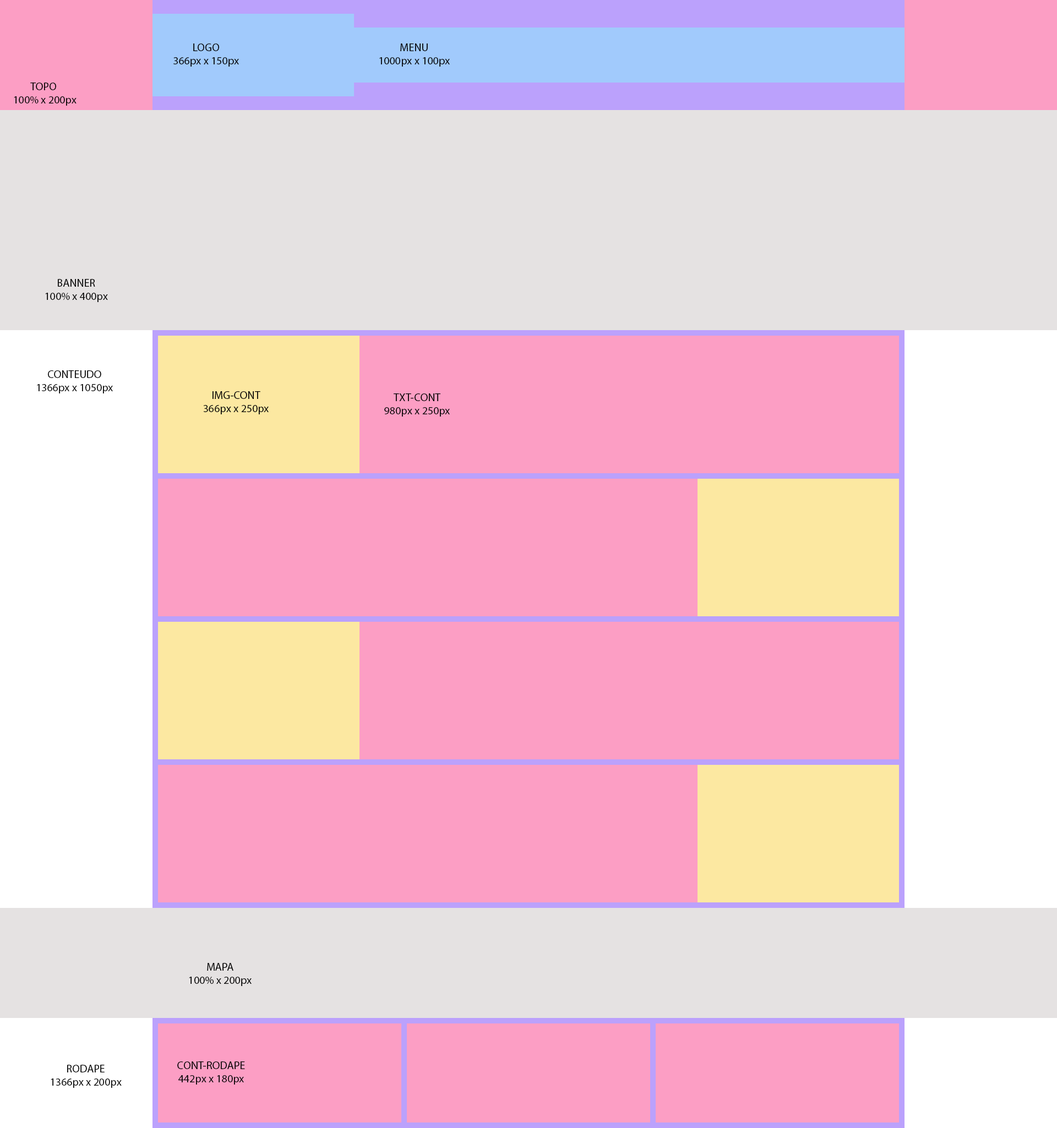
<style>
.page{position:relative;width:1057px;height:1128px;background:#fc9ec4}
.page>*{position:absolute;margin:0}
.t1{font:11px "MyriadPro-Regular";color:#000000}
</style>
<div class="page">
<p class="t1" style="left:173px;top:43px;width:66px;height:24px;text-align:center">LOGO<br>366px x 150px</p>
<p class="t1" style="left:379px;top:43px;width:71px;height:24px;text-align:center">MENU<br>1000px x 100px</p>
<p class="t1" style="left:14px;top:83px;width:63px;height:23px;text-align:center">TOPO <br>100% x 200px</p>
<p class="t1" style="left:45px;top:279px;width:63px;height:23px;text-align:center">BANNER<br>100% x 400px</p>
<p class="t1" style="left:37px;top:370px;width:76px;height:24px;text-align:center">CONTEUDO<br>1366px x 1050px</p>
<p class="t1" style="left:203px;top:391px;width:66px;height:23px;text-align:center">IMG-CONT<br>366px x 250px</p>
<p class="t1" style="left:384px;top:394px;width:66px;height:23px;text-align:center">TXT-CONT<br>980px x 250px</p>
<p class="t1" style="left:189px;top:963px;width:63px;height:23px;text-align:center">MAPA<br>100% x 200px</p>
<p class="t1" style="left:177px;top:1062px;width:68px;height:23px;text-align:center">CONT-RODAPE<br>442px x 180px</p>
<p class="t1" style="left:51px;top:1065px;width:71px;height:23px;text-align:center">RODAPE<br>1366px x 200px</p>
</div>
